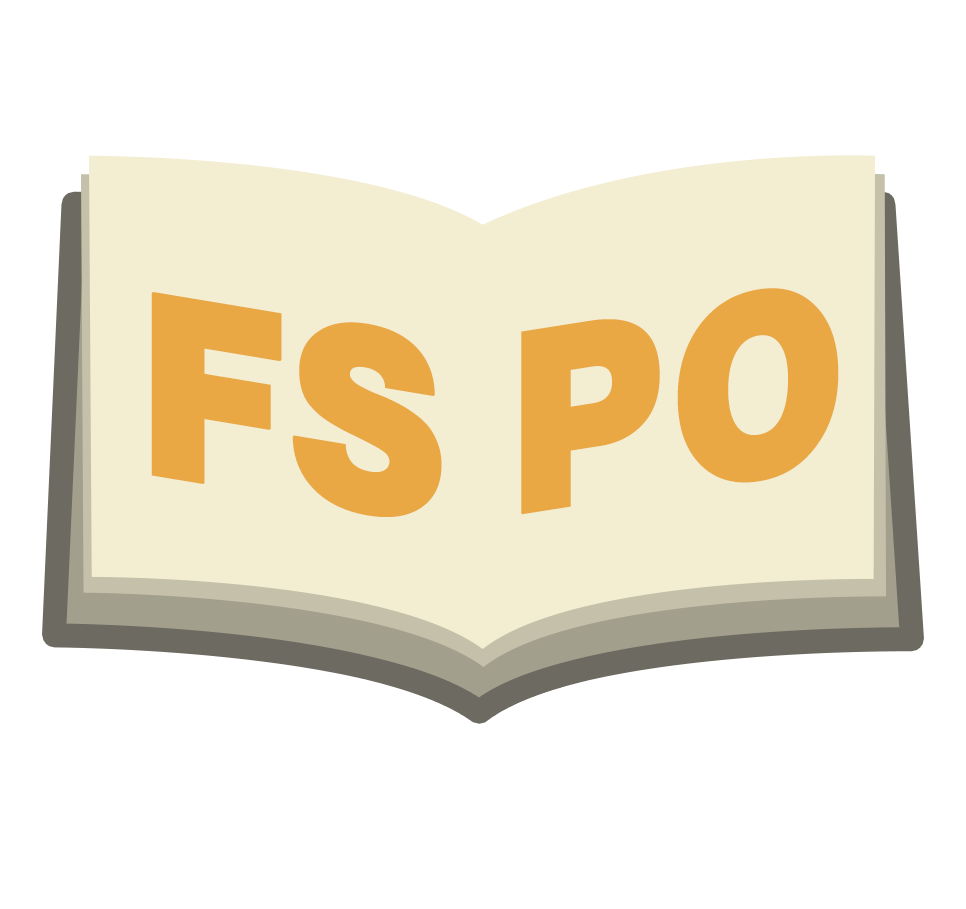
<style>
.page{position:relative;width:966px;height:909px;background:#ffffff}
.page>*{position:absolute;margin:0}
.t1{font:254.6px "HelveticaNeueCyr-Black";color:#e9a844;font-weight:bold;scale:0.92 1}
.t2{font:254.6px "HelveticaNeueCyr-Black";color:#e9a844;font-weight:bold;scale:0.88 1}
</style>
<div class="page">
<p class="t1" style="left:151px;top:292px;width:291px;height:225px;rotate:9deg">FS</p>
<p class="t2" style="left:521px;top:288px;width:318px;height:227px;rotate:-9deg">PO</p>
</div>
